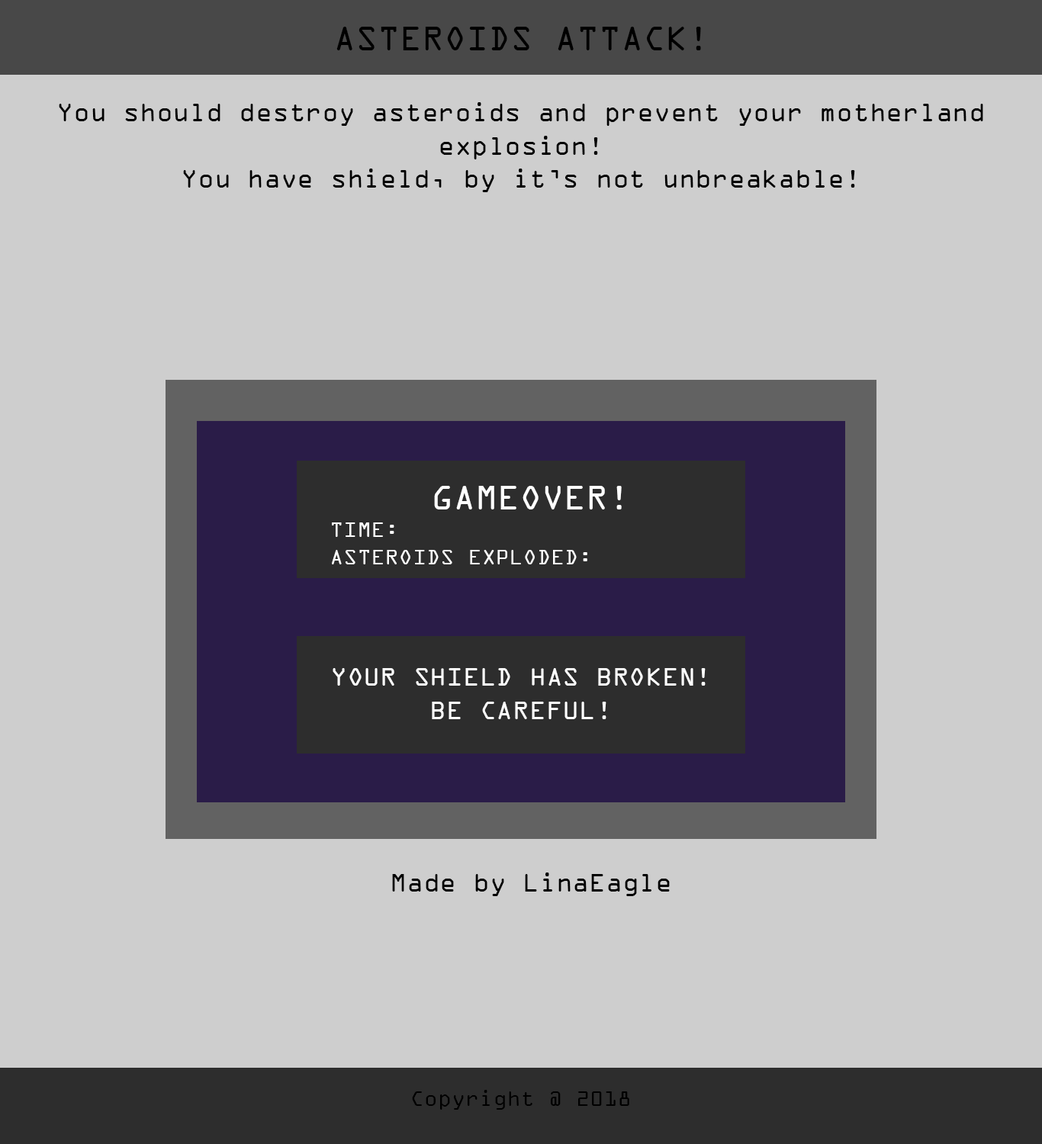
<style>
.page{position:relative;width:1042px;height:1144px;background:#cecece}
.page>*{position:absolute;margin:0}
.t1{font:36.6px "OCRAExtended";color:#000000}
.t2{font:27.5px "OCRAExtended";color:#000000}
.t3{font:22.9px "OCRAExtended";color:#ffffff}
.t4{font:36.6px "OCRAExtended";color:#ffffff}
.t5{font:27.5px "OCRAExtended";color:#ffffff}
.t6{font:22.9px "OCRAExtended";color:#000000}
</style>
<div class="page">
<p class="t1" style="left:336px;top:27px;width:365px;height:23px">ASTEROIDS ATTACK!</p>
<p class="t2" style="left:59px;top:102px;width:924px;height:90px;text-align:center">You should destroy asteroids and prevent your motherland explosion!<br>You have shield, by it’s not unbreakable!</p>
<p class="t3" style="left:332px;top:486px;width:290px;height:79px;text-align:center"><span class="t4">GAMEOVER!<br></span>TIME:<br>ASTEROIDS EXPLODED:</p>
<p class="t5" style="left:333px;top:668px;width:373px;height:51px;text-align:center">YOUR SHIELD HAS BROKEN!<br>BE CAREFUL!</p>
<p class="t2" style="left:392px;top:873px;width:278px;height:23px">Made by LinaEagle</p>
<p class="t6" style="left:412px;top:1090px;width:217px;height:20px">Copyright @ 2018</p>
</div>
